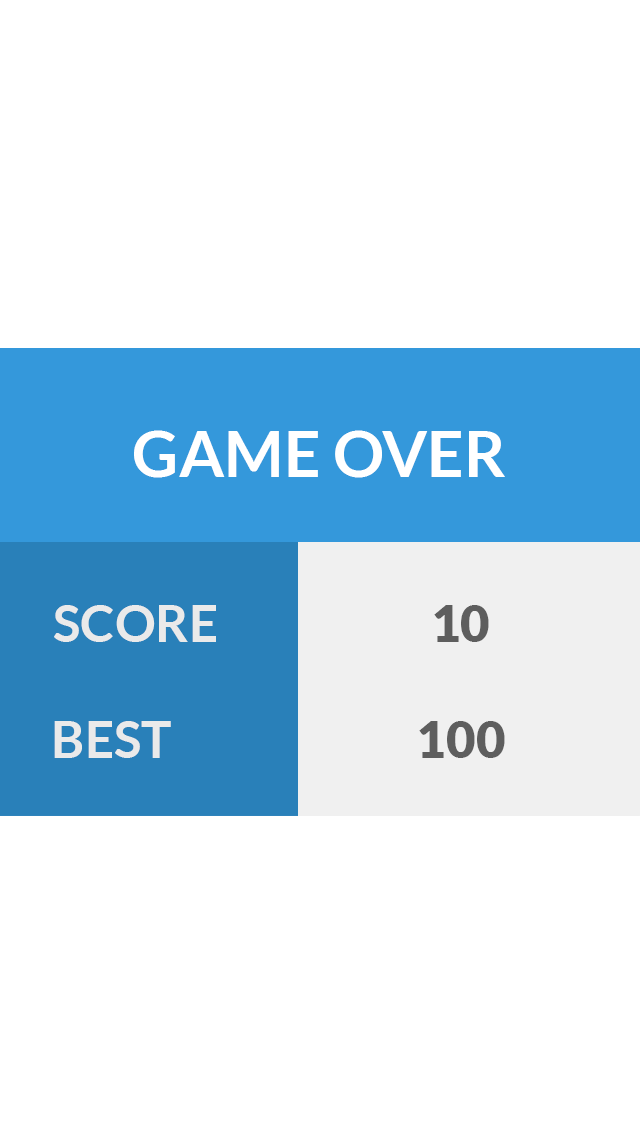
<style>
.page{position:relative;width:640px;height:1136px;background:#ffffff}
.page>*{position:absolute;margin:0}
.t1{font:64px "Lato-Bold";color:#ffffff}
.t2{font:51px "Lato-Bold";color:#eaeaea}
.t3{font:51px "Lato-Black";color:#5e5e5e}
</style>
<div class="page">
<p class="t1" style="left:134px;top:430px;width:371px;height:48px">GAME OVER</p>
<p class="t2" style="left:54px;top:605px;width:162px;height:37px">SCORE</p>
<p class="t3" style="left:434px;top:605px;width:55px;height:37px">10</p>
<p class="t2" style="left:54px;top:721px;width:117px;height:37px">BEST</p>
<p class="t3" style="left:419px;top:721px;width:86px;height:37px">100</p>
</div>
